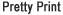
<style>
.page{position:relative;width:63px;height:15px;background:#ffffff}
.page>*{position:absolute;margin:0}
.t1{font:13.2px "ArialNarrow";letter-spacing:0.04em;color:#272a2c;font-weight:bold;scale:0.91 1}
</style>
<div class="page">
<p class="t1" style="left:3px;top:1px;width:58px;height:13px">Pretty Print</p>
</div>
